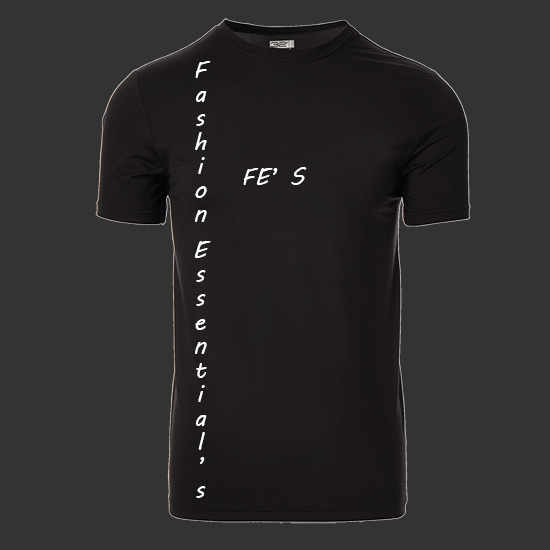
<style>
.page{position:relative;width:550px;height:550px;background:#333333}
.page>*{position:absolute;margin:0}
.t1{font:24px "MVBoli";color:#ffffff}
</style>
<div class="page">
<p class="t1" style="left:194px;top:61px;width:17px;height:437px">Fashion Essential’s</p>
<p class="t1" style="left:243px;top:167px;width:64px;height:18px">FE’S</p>
</div>
